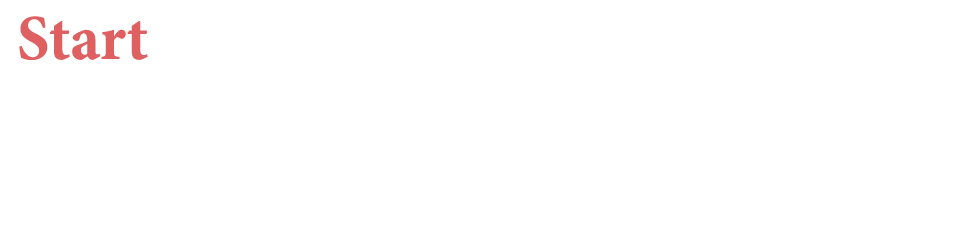
<style>
.page{position:relative;width:978px;height:231px;background:#ffffff}
.page>*{position:absolute;margin:0}
.t1{font:64px "MinionPro-Bold";color:#df6060}
</style>
<div class="page">
<p class="t1" style="left:19px;top:16px;width:129px;height:44px">Start</p>
</div>
